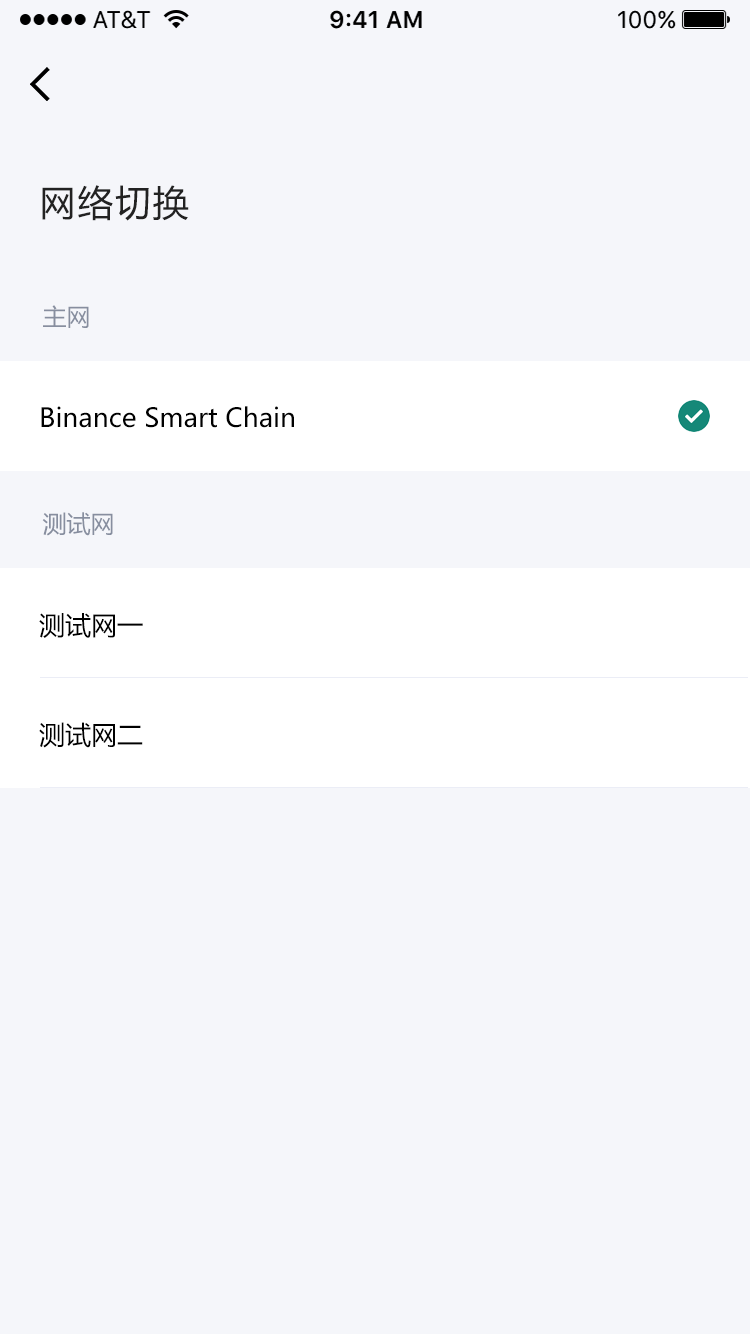
<style>
.page{position:relative;width:750px;height:1334px;background:#f5f6fa}
.page>*{position:absolute;margin:0}
.t1{font:36px "MicrosoftYaHei";letter-spacing:0.05em;color:#222222}
.t2{font:24px "MicrosoftYaHei";color:#878e9f}
.t3{font:26px "MicrosoftYaHei";color:#000000}
</style>
<div class="page">
<p class="t1" style="left:42px;top:185px;width:147px;height:36px">网络切换</p>
<p class="t2" style="left:43px;top:305px;width:46px;height:23px">主网</p>
<p class="t3" style="left:41px;top:406px;width:253px;height:22px">Binance Smart Chain</p>
<p class="t2" style="left:42px;top:512px;width:71px;height:24px">测试网</p>
<p class="t3" style="left:39px;top:613px;width:104px;height:25px">测试网一</p>
<p class="t3" style="left:39px;top:722px;width:104px;height:26px">测试网二</p>
</div>
